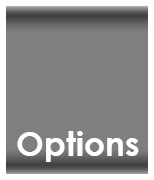
<style>
.page{position:relative;width:154px;height:180px;background:#7f7f7f}
.page>*{position:absolute;margin:0}
.t1{font:33.3px "CenturyGothic-Bold";color:#ffffff}
</style>
<div class="page">
<p class="t1" style="left:17px;top:131px;width:122px;height:31px">Options</p>
</div>
